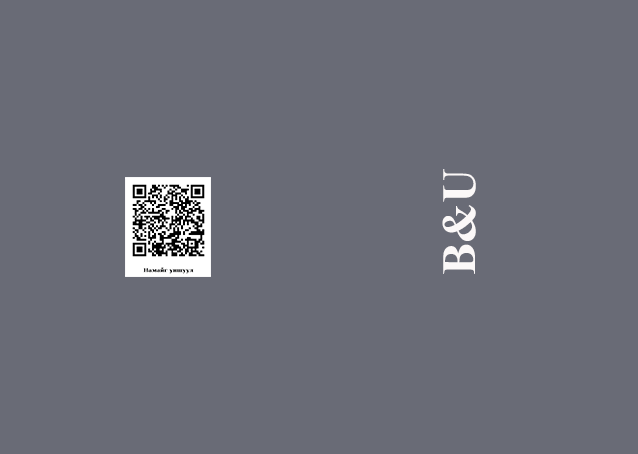
<style>
.page{position:relative;width:638px;height:454px;background:#696b76}
.page>*{position:absolute;margin:0}
.t1{font:48px "TimesNewRomanPS-BoldMT";color:#fbf8f8}
</style>
<div class="page">
<p class="t1" style="left:442px;top:169px;width:34px;height:105px;rotate:-90deg">B&amp;U</p>
</div>
